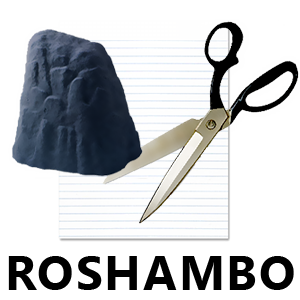
<style>
.page{position:relative;width:300px;height:300px;background:#ffffff}
.page>*{position:absolute;margin:0}
.t1{font:47.9px "SegoeUI-Bold";letter-spacing:0.04em;color:#000000}
</style>
<div class="page">
<p class="t1" style="left:8px;top:256px;width:286px;height:34px">ROSHAMBO</p>
</div>
